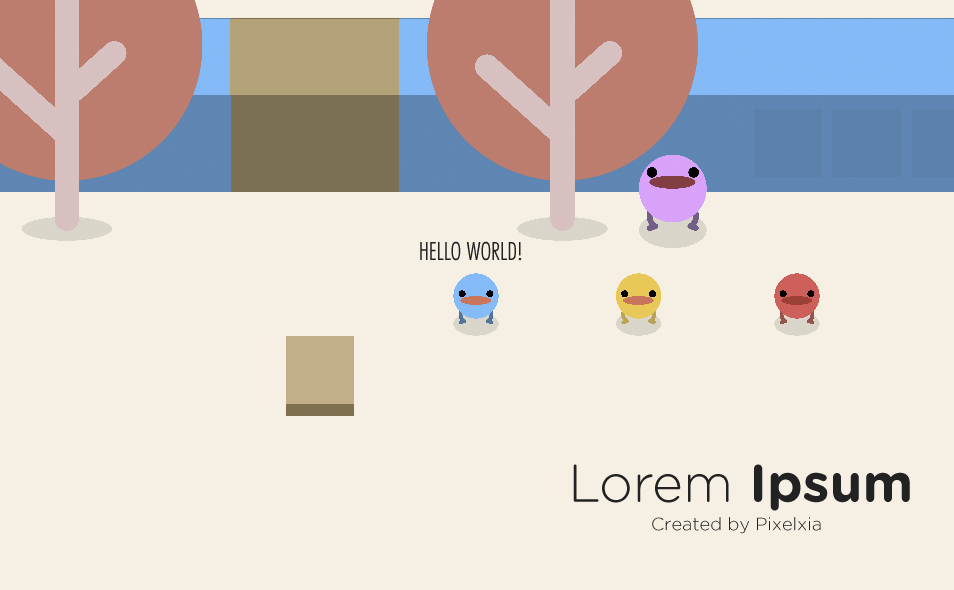
<style>
.page{position:relative;width:954px;height:590px;background:#f6f0e4}
.page>*{position:absolute;margin:0}
.t1{font:24px "FuturaStd-CondensedLight";color:#222222}
.t2{font:53px "GothamRounded-Light";color:#222222}
.t3{font:53px "GothamRounded-Bold";color:#222222}
.t4{font:18px "GothamRounded-Light";color:#222222}
</style>
<div class="page">
<p class="t1" style="left:420px;top:241px;width:102px;height:20px">HELLO WORLD!</p>
<p class="t2" style="left:573px;top:464px;width:337px;height:47px">Lorem <span class="t3">Ipsum</span></p>
<p class="t4" style="left:652px;top:517px;width:169px;height:17px">Created by Pixelxia</p>
</div>
